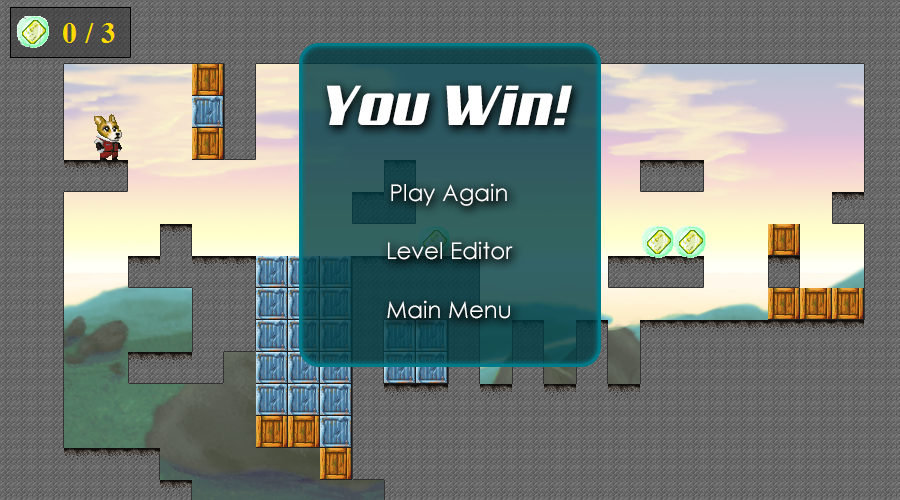
<style>
.page{position:relative;width:900px;height:500px}
.page>*{position:absolute;margin:0}
.t1{font:57px "Aero";color:#ffffff}
.t2{font:22.9px/58.3px "CenturyGothic";color:#ffffff}
</style>
<div class="page">
<p class="t1" style="left:326px;top:85px;width:246px;height:40px">You Win!</p>
<p class="t2" style="left:387px;top:183px;width:126px;height:136px;text-align:center">Play Again<br>Level Editor<br>Main Menu</p>
</div>
